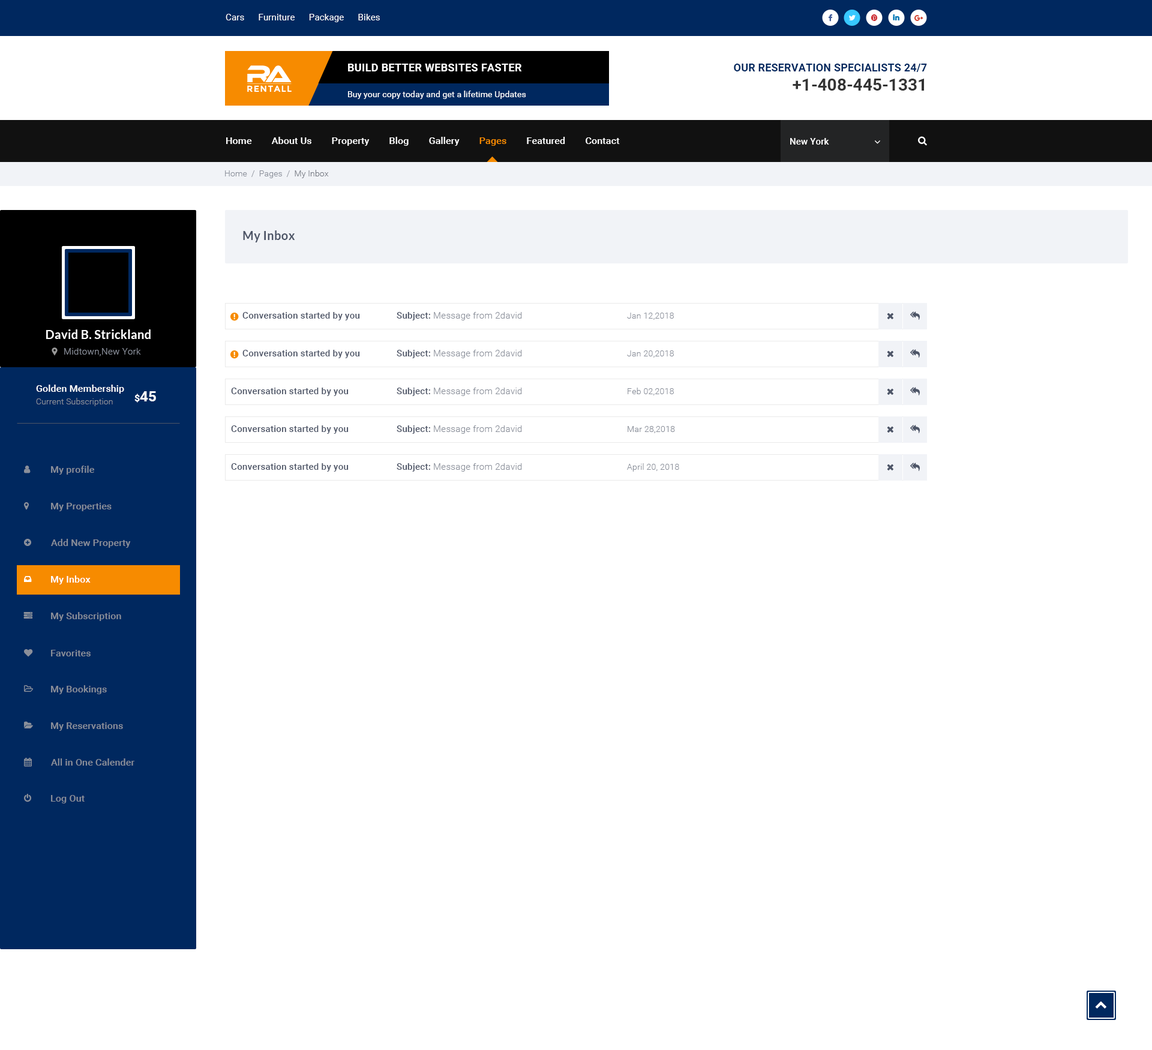
<style>
.page{position:relative;width:1152px;height:1050px;background:#ffffff}
.page>*{position:absolute;margin:0}
.t1{font:9px "Roboto-Regular";letter-spacing:0.01em;color:#ffffff}
.t2{font:10.8px "Roboto-Bold";letter-spacing:0.02em;color:#ffffff;text-transform:uppercase}
.t3{font:10.8px "Roboto-Bold";letter-spacing:0.01em;color:#00285f;text-transform:uppercase}
.t4{font:8.8px "Montserrat-Bold";letter-spacing:0.08em;color:#ffffff;text-transform:uppercase}
.t5{font:16.8px "Roboto-Bold";color:#333333}
.t6{font:8.4px "Roboto-Regular";letter-spacing:0.01em;color:#ffffff}
.t7{font:9.6px "Roboto-Medium";letter-spacing:0.01em;color:#ffffff}
.t8{font:9.6px "Roboto-Medium";letter-spacing:0.01em;color:#f78b00}
.t9{font:9px "Roboto-Medium";letter-spacing:0.01em;color:#ffffff}
.t10{font:8.4px "Roboto-Light";letter-spacing:0.01em;color:#8a8f9a}
.t11{font:8.4px "Roboto-Light";letter-spacing:0.01em;color:#757983}
.t12{font:12px "Lato-Bold";letter-spacing:0.01em;color:#4d5567}
.t13{font:9px "Roboto-Medium";letter-spacing:0.01em;color:#4d5567}
.t14{font:9px "Roboto-Light";letter-spacing:0.01em;color:#8a8f9a}
.t15{font:12px "Lato-Bold";letter-spacing:0.01em;color:#ffffff}
.t16{font:14.4px "Roboto-Bold";letter-spacing:0.01em;color:#ffffff}
.t17{font:9.6px "Roboto-Bold";letter-spacing:0.01em;color:#ffffff}
.t18{font:9.6px "Roboto-Medium";letter-spacing:0.01em;color:#8a8f9a}
</style>
<div class="page">
<p class="t1" style="left:226px;top:14px;width:154px;height:8px">Cars      Furniture      Package      Bikes</p>
<p class="t2" style="left:348px;top:64px;width:174px;height:7px">Build better Websites Faster</p>
<p class="t3" style="left:734px;top:64px;width:193px;height:8px">Our Reservation Specialists 24/7</p>
<p class="t4" style="left:247px;top:85px;width:45px;height:7px">RentAll</p>
<p class="t5" style="left:793px;top:79px;width:131px;height:12px">+1-408-445-1331</p>
<p class="t6" style="left:348px;top:91px;width:178px;height:8px">Buy your copy today and get a lifetime Updates</p>
<p class="t7" style="left:226px;top:137px;width:394px;height:9px">Home        About Us        Property        Blog        Gallery        <span class="t8">Pages</span>        Featured        Contact</p>
<p class="t9" style="left:790px;top:138px;width:39px;height:7px">New York</p>
<p class="t10" style="left:225px;top:170px;width:104px;height:8px">Home  /  Pages  /  <span class="t11">My Inbox</span></p>
<p class="t12" style="left:243px;top:230px;width:52px;height:12px">My Inbox</p>
<p class="t13" style="left:242px;top:312px;width:118px;height:8px">Conversation started by you</p>
<p class="t14" style="left:397px;top:312px;width:125px;height:8px"><span class="t13">Subject: </span>Message from 2david</p>
<p class="t10" style="left:627px;top:313px;width:47px;height:7px">Jan 12,2018</p>
<p class="t15" style="left:46px;top:329px;width:105px;height:10px">David B. Strickland</p>
<p class="t14" style="left:64px;top:348px;width:77px;height:8px">Midtown,New York</p>
<p class="t13" style="left:242px;top:350px;width:118px;height:8px">Conversation started by you</p>
<p class="t14" style="left:397px;top:350px;width:125px;height:8px"><span class="t13">Subject: </span>Message from 2david</p>
<p class="t10" style="left:627px;top:350px;width:47px;height:8px">Jan 20,2018</p>
<p class="t7" style="left:36px;top:385px;width:88px;height:9px">Golden Membership</p>
<p class="t13" style="left:231px;top:388px;width:118px;height:8px">Conversation started by you</p>
<p class="t14" style="left:397px;top:388px;width:125px;height:8px"><span class="t13">Subject: </span>Message from 2david</p>
<p class="t10" style="left:628px;top:388px;width:46px;height:7px">Feb 02,2018</p>
<p class="t10" style="left:36px;top:398px;width:77px;height:8px">Current Subscription</p>
<p class="t16" style="left:134px;top:391px;width:22px;height:12px"><span class="t17">$</span>45</p>
<p class="t13" style="left:231px;top:425px;width:118px;height:9px">Conversation started by you</p>
<p class="t14" style="left:397px;top:425px;width:125px;height:9px"><span class="t13">Subject: </span>Message from 2david</p>
<p class="t10" style="left:628px;top:426px;width:47px;height:7px">Mar 28,2018</p>
<p class="t18" style="left:51px;top:466px;width:43px;height:9px">My profile</p>
<p class="t13" style="left:231px;top:463px;width:118px;height:9px">Conversation started by you</p>
<p class="t14" style="left:397px;top:463px;width:125px;height:9px"><span class="t13">Subject: </span>Message from 2david</p>
<p class="t10" style="left:627px;top:463px;width:52px;height:9px">April 20, 2018</p>
<p class="t18" style="left:51px;top:503px;width:61px;height:8px">My Properties</p>
<p class="t18" style="left:51px;top:539px;width:80px;height:9px">Add New Property</p>
<p class="t7" style="left:51px;top:575px;width:40px;height:9px">My Inbox</p>
<p class="t18" style="left:51px;top:612px;width:70px;height:9px">My Subscription</p>
<p class="t18" style="left:51px;top:650px;width:40px;height:6px">Favorites</p>
<p class="t18" style="left:51px;top:685px;width:56px;height:9px">My Bookings</p>
<p class="t18" style="left:51px;top:722px;width:72px;height:9px">My Reservations</p>
<p class="t18" style="left:51px;top:758px;width:83px;height:8px">All in One Calender</p>
<p class="t18" style="left:51px;top:795px;width:34px;height:8px">Log Out</p>
</div>
